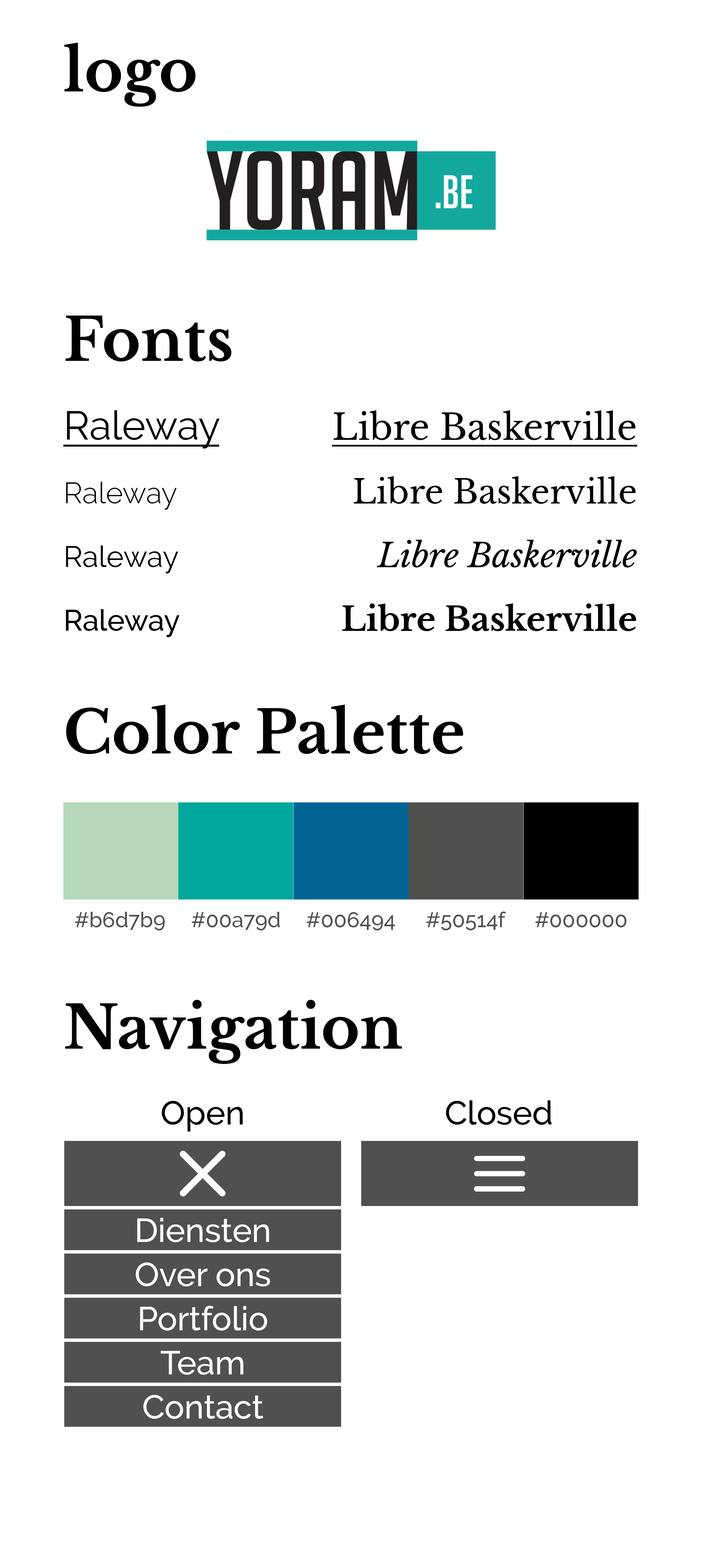
<style>
.page{position:relative;width:702px;height:1568px;background:#ffffff}
.page>*{position:absolute;margin:0}
.t1{font:59px "LibreBaskerville-Bold";color:#010101}
.t2{font:40.1px/63.7px "Raleway-Regular";color:#000000;text-decoration:underline}
.t3{font:29.5px/63.7px "Raleway-Light";color:#000000}
.t4{font:29.5px/63.7px "Raleway-Regular";color:#000000}
.t5{font:29.5px/63.7px "Raleway-Medium";color:#000000}
.t6{font:35.4px/63.7px "LibreBaskerville-Regular";color:#000000;text-decoration:underline}
.t7{font:33px/63.7px "LibreBaskerville-Regular";color:#000000}
.t8{font:33px/63.7px "LibreBaskerville-Italic";color:#000000}
.t9{font:33px/63.7px "LibreBaskerville-Bold";color:#000000}
.t10{font:21.2px "Raleway-Medium";color:#50514f}
.t11{font:33px "Raleway-Medium";color:#000000}
.t12{font:33px "Raleway-Medium";color:#ffffff}
</style>
<div class="page">
<p class="t1" style="left:64px;top:42px;width:132px;height:65px">logo</p>
<p class="t1" style="left:65px;top:315px;width:167px;height:47px">Fonts</p>
<p class="t2" style="left:63px;top:410px;width:157px;height:227px">Raleway<br><span class="t3">Raleway<br></span><span class="t4">Raleway<br></span><span class="t5">Raleway</span></p>
<p class="t6" style="left:332px;top:410px;width:305px;height:221px;text-align:right">Libre Baskerville<br><span class="t7">Libre Baskerville<br></span><span class="t8">Libre Baskerville<br></span><span class="t9">Libre Baskerville</span></p>
<p class="t1" style="left:66px;top:704px;width:397px;height:50px">Color Palette</p>
<p class="t10" style="left:75px;top:912px;width:90px;height:19px">#b6d7b9</p>
<p class="t10" style="left:192px;top:912px;width:88px;height:19px">#00a79d</p>
<p class="t10" style="left:307px;top:912px;width:88px;height:19px">#006494</p>
<p class="t10" style="left:426px;top:911px;width:80px;height:20px">#50514f</p>
<p class="t10" style="left:535px;top:912px;width:91px;height:15px">#000000</p>
<p class="t1" style="left:65px;top:1000px;width:337px;height:64px">Navigation</p>
<p class="t11" style="left:162px;top:1101px;width:81px;height:31px">Open</p>
<p class="t11" style="left:446px;top:1100px;width:105px;height:25px">Closed</p>
<p class="t12" style="left:137px;top:1218px;width:132px;height:25px">Diensten</p>
<p class="t12" style="left:136px;top:1262px;width:134px;height:25px">Over ons</p>
<p class="t12" style="left:140px;top:1306px;width:127px;height:25px">Portfolio</p>
<p class="t12" style="left:160px;top:1351px;width:83px;height:24px">Team</p>
<p class="t12" style="left:143px;top:1395px;width:120px;height:24px">Contact</p>
</div>
